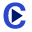
<style>
.page{position:relative;width:32px;height:32px;background:#ffffff}
.page>*{position:absolute;margin:0}
.t1{font:48px "MicrosoftSansSerif";color:#2c47ca}
</style>
<div class="page">
<p class="t1" style="left:3px;top:2px;width:23px;height:27px">c</p>
</div>
